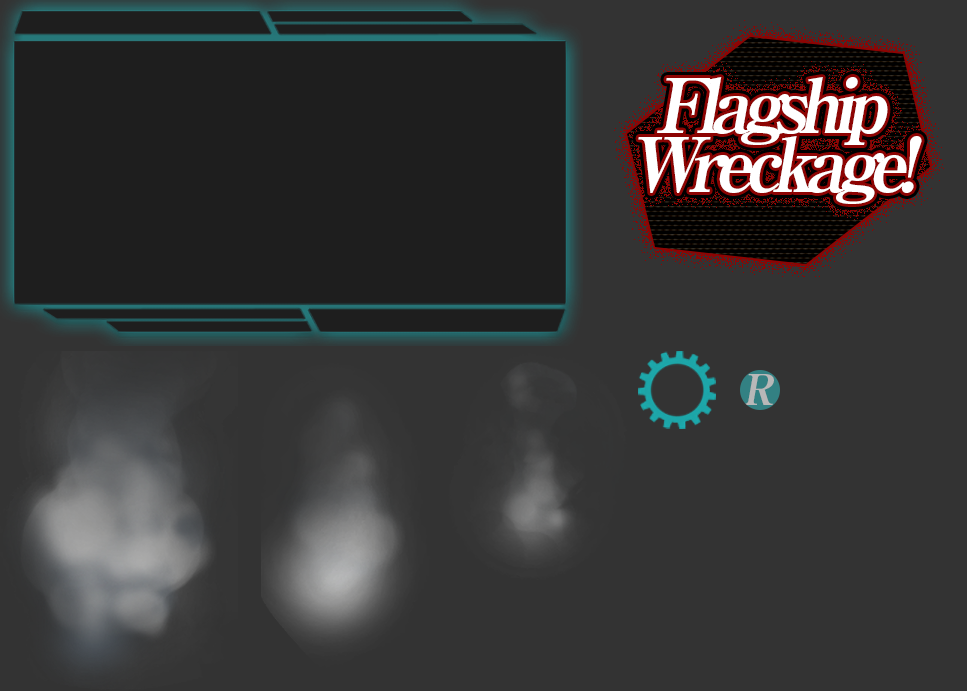
<style>
.page{position:relative;width:967px;height:691px;background:#333333}
.page>*{position:absolute;margin:0}
.t1{font:76px/59px "RyuminPro-ExBold";letter-spacing:-0.12em;color:#ffffff;font-style:italic}
.t2{font:42px "RyuminPro-ExBold";letter-spacing:-0.12em;color:#b8b8b8;font-style:italic}
</style>
<div class="page">
<p class="t1" style="left:638px;top:77px;width:284px;height:127px;text-align:center">Flagship<br>Wreckage!</p>
<p class="t2" style="left:743px;top:374px;width:31px;height:31px">R</p>
</div>
